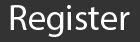
<style>
.page{position:relative;width:140px;height:42px;background:#333333}
.page>*{position:absolute;margin:0}
.t1{font:36px "MyriadPro-Regular";color:#ffffff}
</style>
<div class="page">
<p class="t1" style="left:10px;top:5px;width:120px;height:32px">Register</p>
</div>
